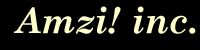
<style>
.page{position:relative;width:200px;height:50px;background:#000000}
.page>*{position:absolute;margin:0}
.t1{font:35.9px "CenturySchoolbook-BoldItalic";color:#ffffcc}
</style>
<div class="page">
<p class="t1" style="left:13px;top:6px;width:183px;height:28px">Amzi! inc.</p>
</div>
